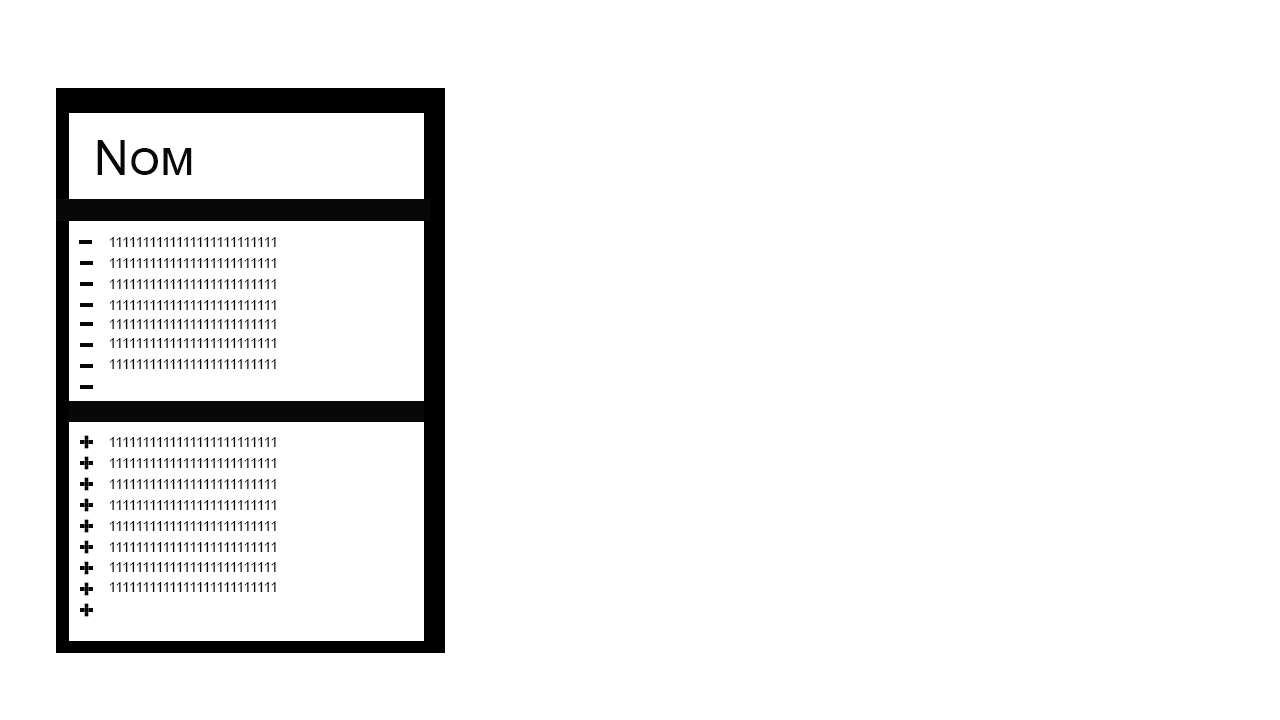
<style>
.page{position:relative;width:1280px;height:720px;background:#ffffff}
.page>*{position:absolute;margin:0}
.t1{font:48px "ArialMT";color:#080807;font-variant:small-caps}
.t2{font:14px "ArialMT";color:#080807;font-variant:small-caps}
</style>
<div class="page">
<p class="t1" style="left:97px;top:140px;width:95px;height:35px">Nom</p>
<p class="t2" style="left:109px;top:237px;width:167px;height:10px">1111111111111111111111111</p>
<p class="t2" style="left:109px;top:258px;width:167px;height:10px">1111111111111111111111111</p>
<p class="t2" style="left:109px;top:279px;width:167px;height:10px">1111111111111111111111111</p>
<p class="t2" style="left:109px;top:300px;width:167px;height:10px">1111111111111111111111111</p>
<p class="t2" style="left:109px;top:319px;width:167px;height:10px">1111111111111111111111111</p>
<p class="t2" style="left:109px;top:338px;width:167px;height:10px">1111111111111111111111111</p>
<p class="t2" style="left:109px;top:359px;width:167px;height:10px">1111111111111111111111111</p>
<p class="t2" style="left:109px;top:437px;width:167px;height:10px">1111111111111111111111111</p>
<p class="t2" style="left:109px;top:458px;width:167px;height:10px">1111111111111111111111111</p>
<p class="t2" style="left:109px;top:479px;width:167px;height:10px">1111111111111111111111111</p>
<p class="t2" style="left:109px;top:500px;width:167px;height:10px">1111111111111111111111111</p>
<p class="t2" style="left:109px;top:521px;width:167px;height:10px">1111111111111111111111111</p>
<p class="t2" style="left:109px;top:542px;width:167px;height:10px">1111111111111111111111111</p>
<p class="t2" style="left:109px;top:562px;width:167px;height:10px">1111111111111111111111111</p>
<p class="t2" style="left:109px;top:582px;width:167px;height:10px">1111111111111111111111111</p>
</div>
